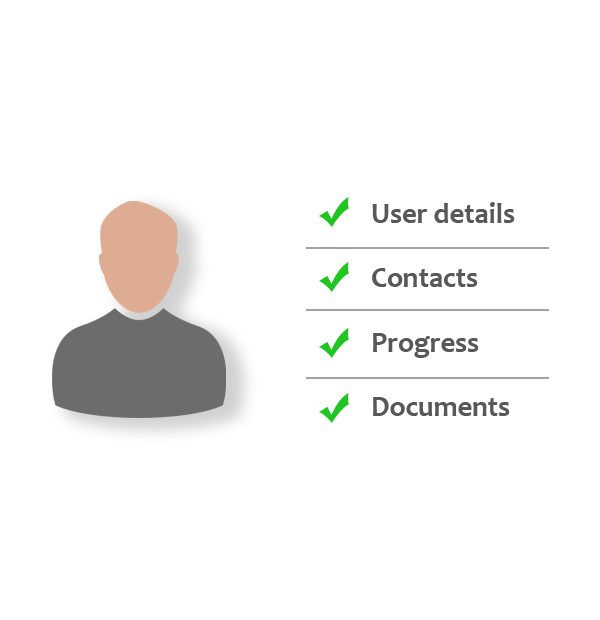
<style>
.page{position:relative;width:600px;height:620px;background:#ffffff}
.page>*{position:absolute;margin:0}
.t1{font:28.6px "Candara-Bold";color:#585858}
</style>
<div class="page">
<p class="t1" style="left:372px;top:202px;width:143px;height:214px">User details<br>Contacts<br>Progress<br>Documents</p>
</div>
